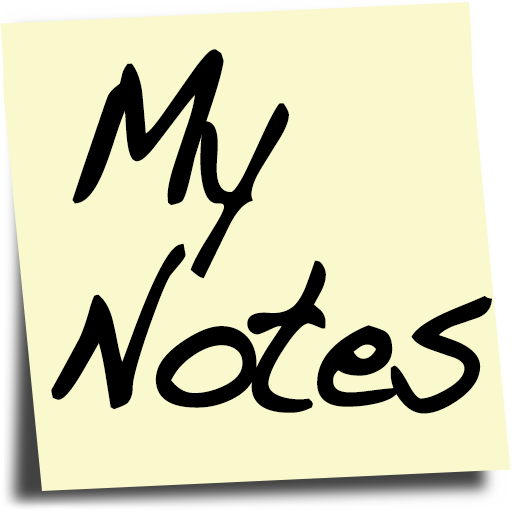
<style>
.page{position:relative;width:512px;height:512px;background:#f9f9cd}
.page>*{position:absolute;margin:0}
.t1{font:217.3px "Handwriting-Dakota";letter-spacing:-0.065em;color:#000000;font-weight:bold;scale:0.74 1}
</style>
<div class="page">
<p class="t1" style="left:72px;top:49px;width:217px;height:230px">My</p>
<p class="t1" style="left:51px;top:243px;width:441px;height:171px">Notes</p>
</div>
